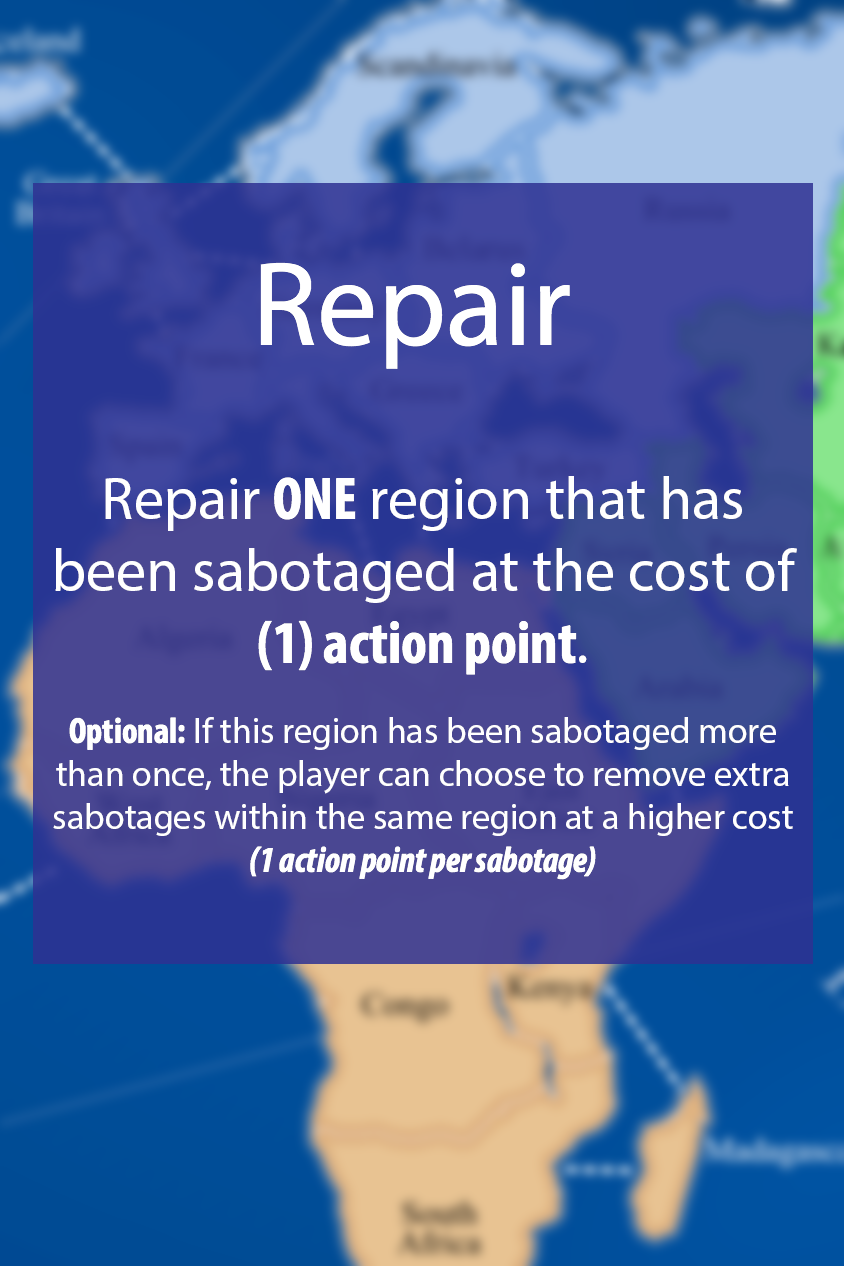
<style>
.page{position:relative;width:844px;height:1266px}
.page>*{position:absolute;margin:0}
.t1{font:120px "MyriadPro-Regular";color:#ffffff}
.t2{font:36px "MyriadPro-Regular";color:#ffffff}
.t3{font:48px "MyriadPro-Regular";color:#ffffff}
.t4{font:60px "MyriadPro-Regular";color:#ffffff}
.t5{font:60px "MyriadPro-BoldCond";color:#ffffff}
.t6{font:36px "MyriadPro-BoldCond";color:#ffffff}
.t7{font:36px "MyriadPro-BoldCondIt";color:#ffffff}
</style>
<div class="page">
<p class="t1" style="left:260px;top:262px;width:310px;height:107px">Repair</p>
<p class="t2" style="left:53px;top:476px;width:744px;height:404px;text-align:center"><span class="t3"><br><br><br><br><br></span><span class="t4">Repair </span><span class="t5">ONE</span><span class="t4"> region that has been sabotaged at the cost of </span><span class="t5">(1) action point</span><span class="t4">.<br><br></span><span class="t6">Optional:</span> If this region has been sabotaged more than once, the player can choose to remove extra sabotages within the same region at a higher cost  <span class="t7">(1 action point per sabotage)</span></p>
</div>
